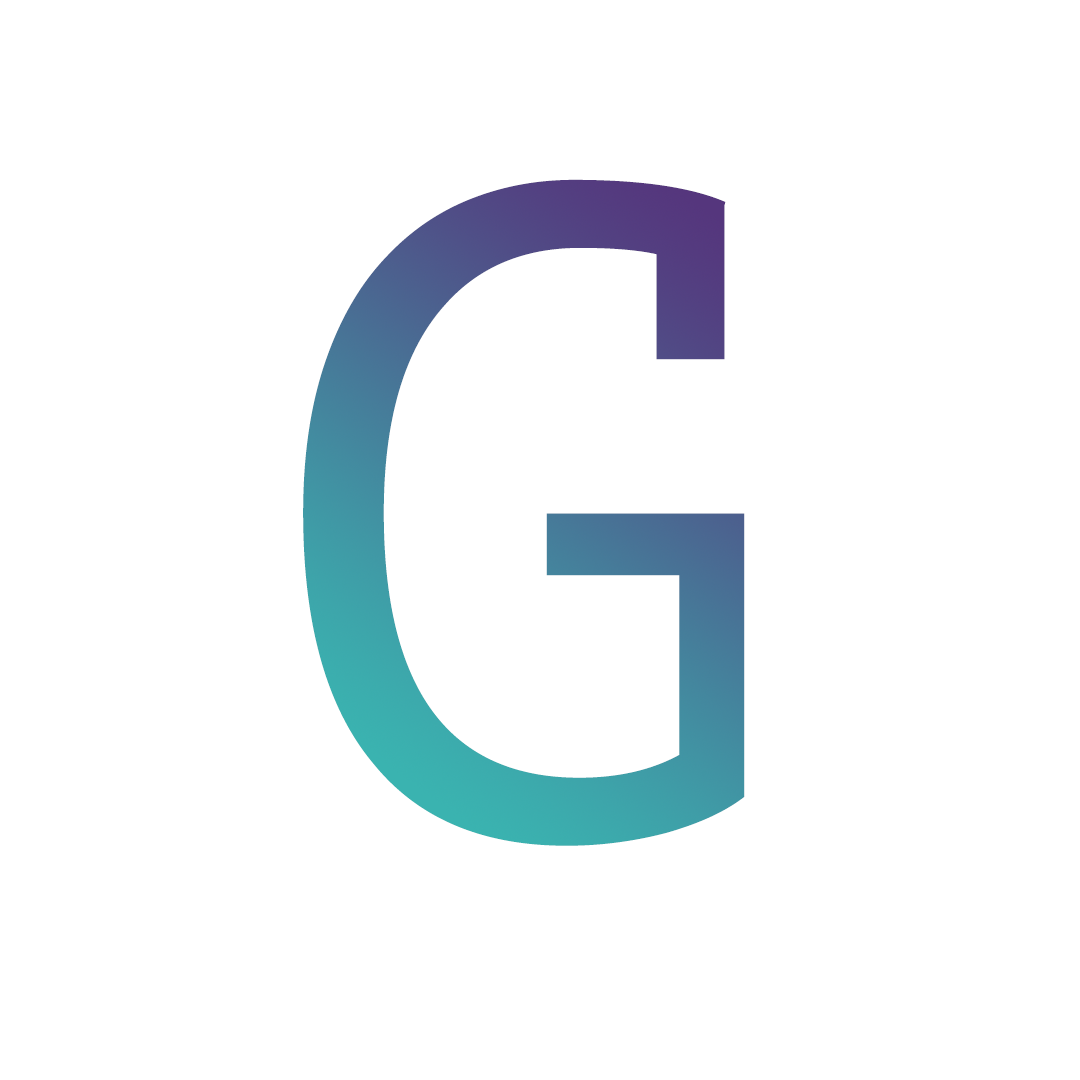
<style>
.page{position:relative;width:1080px;height:1080px;background:#ffffff}
.page>*{position:absolute;margin:0}
.t1{font:788.7px "KawkabMono-Regular"}
</style>
<div class="page">
<p class="t1" style="left:303px;top:179px;width:442px;height:667px">G</p>
</div>
